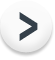
<style>
.page{position:relative;width:55px;height:60px;background:#fafafa}
.page>*{position:absolute;margin:0}
.t1{font:52.8px "Arial-BoldMT";letter-spacing:0.04em;color:#35404a;scale:0.67 1}
</style>
<div class="page">
<p class="t1" style="left:19px;top:12px;width:19px;height:29px">&gt;</p>
</div>
